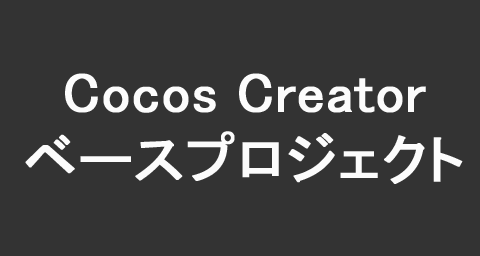
<style>
.page{position:relative;width:480px;height:256px;background:#333333}
.page>*{position:absolute;margin:0}
.t1{font:56px "MS-PGothic";color:#ffffff;font-weight:bold}
</style>
<div class="page">
<p class="t1" style="left:25px;top:73px;width:438px;height:111px;text-align:center">Cocos Creator<br>ベースプロジェクト</p>
</div>
